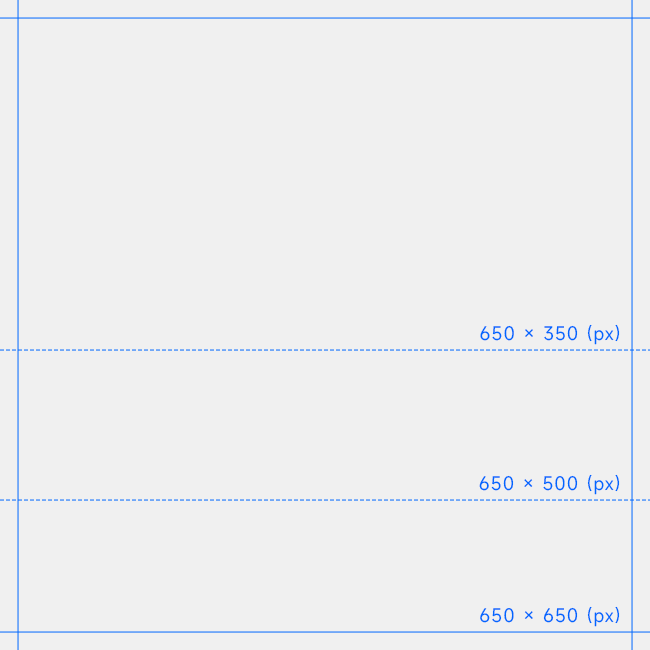
<style>
.page{position:relative;width:650px;height:650px;background:#f0f0f0}
.page>*{position:absolute;margin:0}
.t1{font:18px "MiSans-Regular";letter-spacing:0.06em;color:#0067fe}
</style>
<div class="page">
<p class="t1" style="left:480px;top:324px;width:140px;height:21px">650 × 350 (px)</p>
<p class="t1" style="left:479px;top:474px;width:141px;height:21px">650 × 500 (px)</p>
<p class="t1" style="left:480px;top:606px;width:140px;height:21px">650 × 650 (px)</p>
</div>
